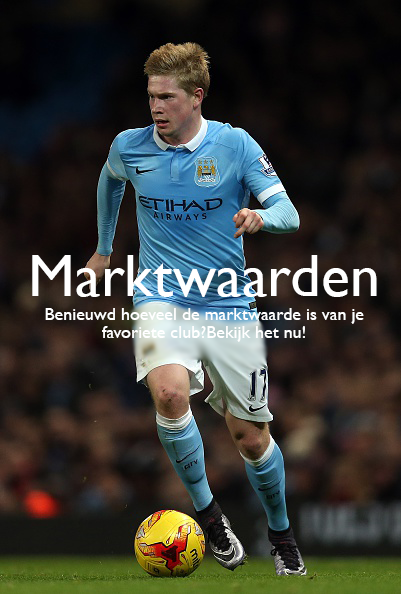
<style>
.page{position:relative;width:401px;height:594px}
.page>*{position:absolute;margin:0}
.t1{font:60px "GillSansMT";color:#ffffff}
.t2{font:18px/18px "GillSansMT";color:#ffffff}
</style>
<div class="page">
<p class="t1" style="left:32px;top:255px;width:345px;height:42px">Marktwaarden</p>
<p class="t2" style="left:45px;top:308px;width:319px;height:34px;text-align:center">Benieuwd hoeveel de marktwaarde is van je favoriete club?Bekijk het nu!</p>
</div>
